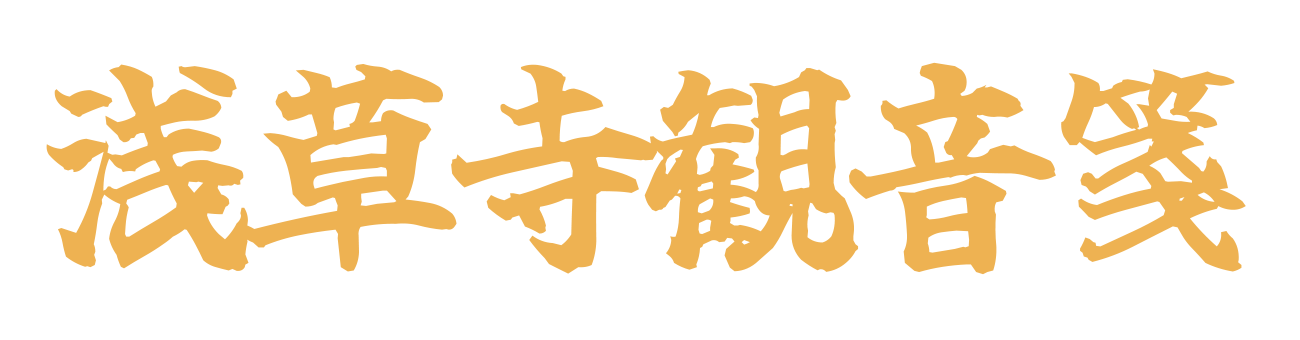
<style>
.page{position:relative;width:1300px;height:340px;background:#ffffff}
.page>*{position:absolute;margin:0}
.t1{font:200px "Tamanegi-Kaisho-Geki-FreeVer-7";color:#eeb252}
</style>
<div class="page">
<p class="t1" style="left:46px;top:62px;width:1200px;height:213px">浅草寺観音箋</p>
</div>
